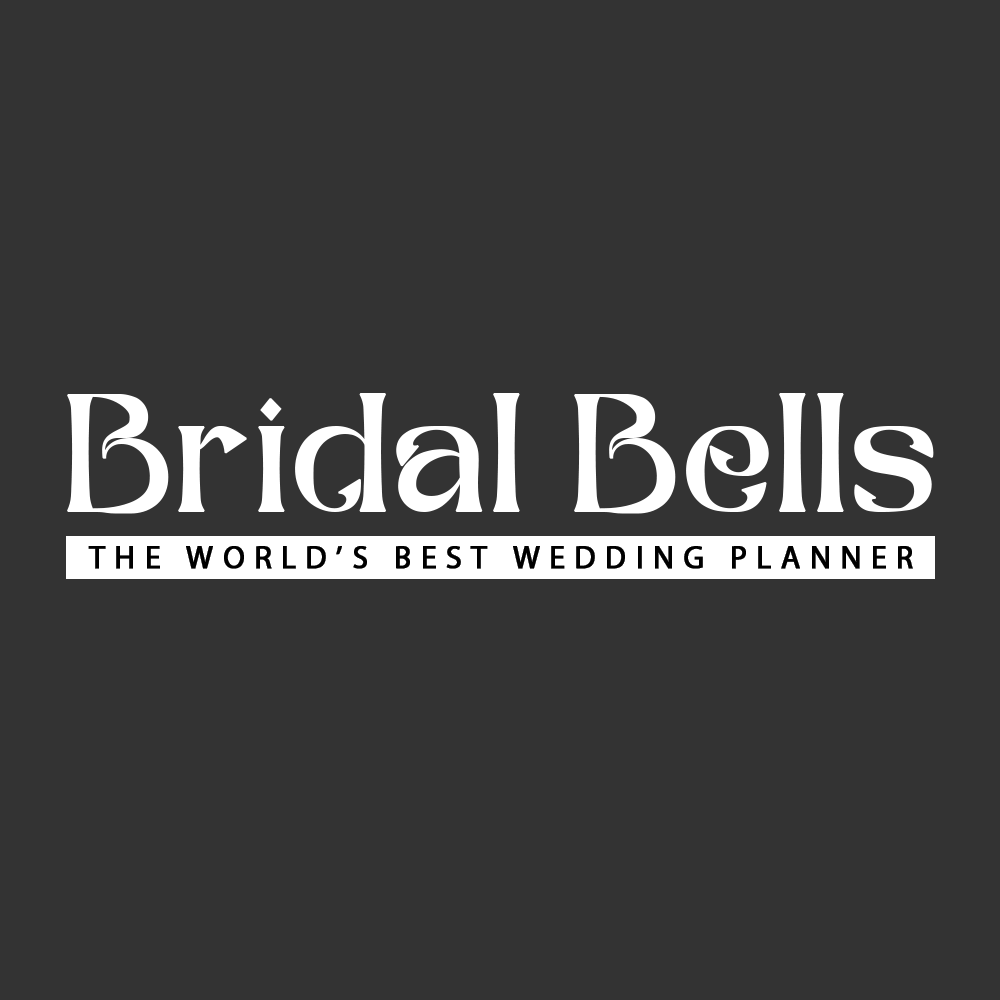
<style>
.page{position:relative;width:1000px;height:1000px;background:#333333}
.page>*{position:absolute;margin:0}
.t1{font:165.4px "TheBafger";color:#ffffff;font-weight:bold}
.t2{font:31.9px "MyriadPro-Regular";letter-spacing:0.28em;color:#000000;text-transform:uppercase;font-weight:bold}
</style>
<div class="page">
<p class="t1" style="left:67px;top:393px;width:867px;height:121px">Bridal Bells</p>
<p class="t2" style="left:88px;top:546px;width:825px;height:23px">The world’s Best Wedding Planner</p>
</div>
